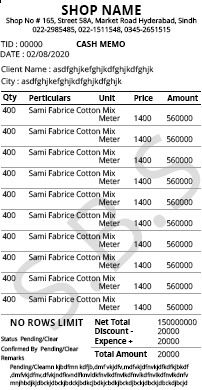
<style>
.page{position:relative;width:202px;height:390px;background:#ffffff}
.page>*{position:absolute;margin:0}
.t1{font:13.1px "OpenSans-Bold";color:#000000}
.t2{font:7px "OpenSans";color:#000000}
.t3{font:8px "OpenSans"}
.t4{font:8px "OpenSans-Bold";color:#000000}
.t5{font:8px "OpenSans-Bold";color:#000000;scale:0.96 1}
.t6{font:8px "OpenSans";scale:0.96 1}
.t7{font:9.4px "OpenSans-Bold";color:#000000}
.t8{font:6px "OpenSans";color:#000000;scale:0.96 1}
.t9{font:6px/8px "OpenSans";color:#000000;scale:0.96 1}
</style>
<div class="page">
<p class="t1" style="left:61px;top:5px;width:80px;height:10px">SHOP NAME</p>
<p class="t2" style="left:6px;top:17px;width:191px;height:8px">Shop No # 165, Street 58A, Market Road Hyderabad, Sindh</p>
<p class="t2" style="left:32px;top:26px;width:139px;height:8px">022-2985485, 022-1511548, 0345-2651515</p>
<p class="t3" style="left:0px;top:41px;width:43px;height:7px">TID : 00000</p>
<p class="t4" style="left:76px;top:41px;width:49px;height:6px">CASH MEMO</p>
<p class="t3" style="left:0px;top:51px;width:70px;height:7px">DATE : 02/08/2020</p>
<p class="t3" style="left:1px;top:65px;width:153px;height:10px">Client Name : asdfghjkefghjkdfghjkdfghjk</p>
<p class="t3" style="left:1px;top:77px;width:121px;height:10px">City : asdfghjkefghjkdfghjkdfghjk</p>
<p class="t5" style="left:3px;top:94px;width:14px;height:8px">Qty</p>
<p class="t5" style="left:29px;top:95px;width:42px;height:6px">Perticulars</p>
<p class="t5" style="left:99px;top:95px;width:16px;height:6px">Unit</p>
<p class="t5" style="left:134px;top:95px;width:19px;height:6px">Price</p>
<p class="t5" style="left:167px;top:95px;width:31px;height:6px">Amount</p>
<p class="t6" style="left:2px;top:107px;width:14px;height:7px">400</p>
<p class="t6" style="left:29px;top:106px;width:87px;height:8px">Sami Fabrice Cotton Mix</p>
<p class="t6" style="left:99px;top:115px;width:21px;height:7px">Meter</p>
<p class="t6" style="left:134px;top:115px;width:18px;height:7px">1400</p>
<p class="t6" style="left:166px;top:115px;width:27px;height:7px">560000</p>
<p class="t6" style="left:2px;top:128px;width:14px;height:7px">400</p>
<p class="t6" style="left:29px;top:127px;width:87px;height:8px">Sami Fabrice Cotton Mix</p>
<p class="t6" style="left:99px;top:136px;width:21px;height:7px">Meter</p>
<p class="t6" style="left:134px;top:136px;width:18px;height:7px">1400</p>
<p class="t6" style="left:166px;top:136px;width:27px;height:7px">560000</p>
<p class="t6" style="left:2px;top:149px;width:14px;height:7px">400</p>
<p class="t6" style="left:29px;top:148px;width:87px;height:8px">Sami Fabrice Cotton Mix</p>
<p class="t6" style="left:99px;top:157px;width:21px;height:7px">Meter</p>
<p class="t6" style="left:134px;top:157px;width:18px;height:7px">1400</p>
<p class="t6" style="left:166px;top:157px;width:27px;height:7px">560000</p>
<p class="t6" style="left:2px;top:170px;width:14px;height:7px">400</p>
<p class="t6" style="left:29px;top:169px;width:87px;height:8px">Sami Fabrice Cotton Mix</p>
<p class="t6" style="left:99px;top:178px;width:21px;height:7px">Meter</p>
<p class="t6" style="left:134px;top:178px;width:18px;height:7px">1400</p>
<p class="t6" style="left:166px;top:178px;width:27px;height:7px">560000</p>
<p class="t6" style="left:2px;top:191px;width:14px;height:7px">400</p>
<p class="t6" style="left:29px;top:190px;width:87px;height:8px">Sami Fabrice Cotton Mix</p>
<p class="t6" style="left:99px;top:199px;width:21px;height:7px">Meter</p>
<p class="t6" style="left:134px;top:199px;width:18px;height:7px">1400</p>
<p class="t6" style="left:166px;top:199px;width:27px;height:7px">560000</p>
<p class="t6" style="left:2px;top:212px;width:14px;height:7px">400</p>
<p class="t6" style="left:29px;top:211px;width:87px;height:8px">Sami Fabrice Cotton Mix</p>
<p class="t6" style="left:99px;top:220px;width:21px;height:7px">Meter</p>
<p class="t6" style="left:134px;top:220px;width:18px;height:7px">1400</p>
<p class="t6" style="left:166px;top:220px;width:27px;height:7px">560000</p>
<p class="t6" style="left:2px;top:233px;width:14px;height:7px">400</p>
<p class="t6" style="left:29px;top:232px;width:87px;height:8px">Sami Fabrice Cotton Mix</p>
<p class="t6" style="left:99px;top:241px;width:21px;height:7px">Meter</p>
<p class="t6" style="left:134px;top:241px;width:18px;height:7px">1400</p>
<p class="t6" style="left:166px;top:241px;width:27px;height:7px">560000</p>
<p class="t6" style="left:2px;top:254px;width:14px;height:7px">400</p>
<p class="t6" style="left:29px;top:253px;width:87px;height:8px">Sami Fabrice Cotton Mix</p>
<p class="t6" style="left:99px;top:262px;width:21px;height:7px">Meter</p>
<p class="t6" style="left:134px;top:262px;width:18px;height:7px">1400</p>
<p class="t6" style="left:166px;top:262px;width:27px;height:7px">560000</p>
<p class="t6" style="left:2px;top:275px;width:14px;height:7px">400</p>
<p class="t6" style="left:29px;top:274px;width:87px;height:8px">Sami Fabrice Cotton Mix</p>
<p class="t6" style="left:99px;top:283px;width:21px;height:7px">Meter</p>
<p class="t6" style="left:134px;top:283px;width:18px;height:7px">1400</p>
<p class="t6" style="left:166px;top:283px;width:27px;height:7px">560000</p>
<p class="t6" style="left:2px;top:296px;width:14px;height:7px">400</p>
<p class="t6" style="left:29px;top:295px;width:87px;height:8px">Sami Fabrice Cotton Mix</p>
<p class="t6" style="left:99px;top:304px;width:21px;height:7px">Meter</p>
<p class="t6" style="left:134px;top:304px;width:18px;height:7px">1400</p>
<p class="t6" style="left:166px;top:304px;width:27px;height:7px">560000</p>
<p class="t7" style="left:10px;top:319px;width:74px;height:7px">NO ROWS LIMIT</p>
<p class="t5" style="left:95px;top:319px;width:35px;height:6px">Net Total</p>
<p class="t5" style="left:95px;top:328px;width:38px;height:6px">Discount -</p>
<p class="t6" style="left:157px;top:328px;width:23px;height:7px">20000</p>
<p class="t6" style="left:158px;top:319px;width:39px;height:7px">150000000</p>
<p class="t8" style="left:1px;top:336px;width:17px;height:6px">Status</p>
<p class="t8" style="left:20px;top:336px;width:39px;height:7px">Pending/Clear</p>
<p class="t5" style="left:95px;top:338px;width:38px;height:8px">Expence +</p>
<p class="t6" style="left:157px;top:338px;width:23px;height:7px">20000</p>
<p class="t8" style="left:1px;top:346px;width:37px;height:7px">Confirmed By</p>
<p class="t8" style="left:40px;top:346px;width:39px;height:7px">Pending/Clear</p>
<p class="t5" style="left:94px;top:351px;width:53px;height:6px">Total Amount</p>
<p class="t6" style="left:157px;top:351px;width:23px;height:7px">20000</p>
<p class="t8" style="left:1px;top:355px;width:24px;height:6px">Remarks</p>
<p class="t9" style="left:10px;top:364px;width:179px;height:23px">Pending/Cleamn kjbdfmn kdfjb,dmf vkjdfv,mdfvkjdfnvkjdfkdfkjbkdf<br>,dmfvkjdfnv,dfvkjndfkvndlfknvldkfnvlkdfnvlkdfnvlkdfnvlkdfnvlkdnfv<br>mnjhbdjkjdbckjdbckjbdckjbdkcjbdkjcbdkjbckdjbckjdbckjdbckdjbcjd</p>
</div>
